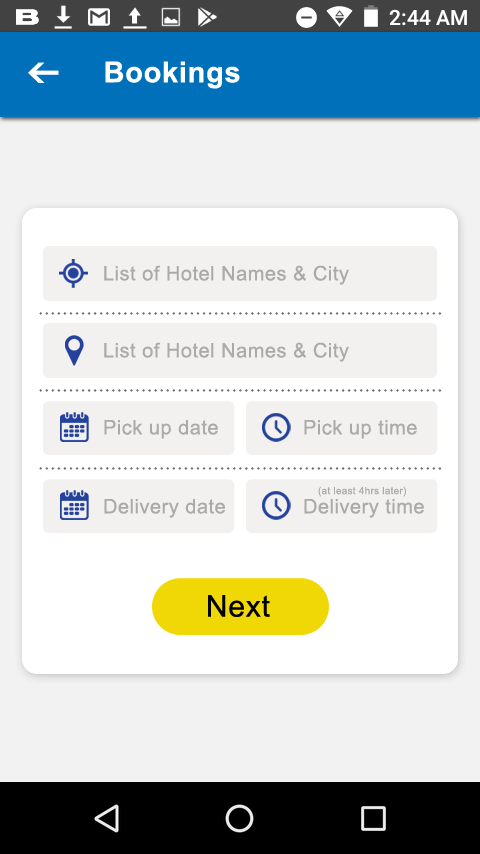
<style>
.page{position:relative;width:480px;height:854px;background:#ffffff}
.page>*{position:absolute;margin:0}
.t1{font:29px "Arial-BoldMT";letter-spacing:0.025em;color:#ffffff}
.t2{font:20px "ArialMT";letter-spacing:0.025em;color:#aaaaaa}
.t3{font:10px "ArialMT";letter-spacing:0.025em;color:#aaaaaa}
.t4{font:30px "ArialMT";letter-spacing:0.025em;color:#000000}
</style>
<div class="page">
<p class="t1" style="left:105px;top:61px;width:135px;height:28px">Bookings</p>
<p class="t2" style="left:104px;top:265px;width:245px;height:20px">List of Hotel Names &amp; City</p>
<p class="t2" style="left:104px;top:342px;width:245px;height:20px">List of Hotel Names &amp; City</p>
<p class="t2" style="left:104px;top:420px;width:114px;height:19px">Pick up date</p>
<p class="t2" style="left:304px;top:420px;width:113px;height:19px">Pick up time</p>
<p class="t3" style="left:318px;top:486px;width:89px;height:11px">(at least 4hrs later)</p>
<p class="t2" style="left:104px;top:499px;width:121px;height:19px">Delivery date</p>
<p class="t2" style="left:304px;top:499px;width:120px;height:19px">Delivery time</p>
<p class="t4" style="left:208px;top:595px;width:62px;height:22px">Next</p>
</div>
